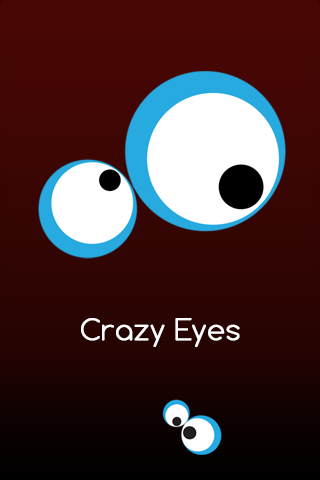
<style>
.page{position:relative;width:320px;height:480px}
.page>*{position:absolute;margin:0}
.t1{font:28px "Comfortaa-Light";color:#ffffff;font-weight:bold}
</style>
<div class="page">
<p class="t1" style="left:81px;top:318px;width:159px;height:29px">Crazy Eyes</p>
</div>
